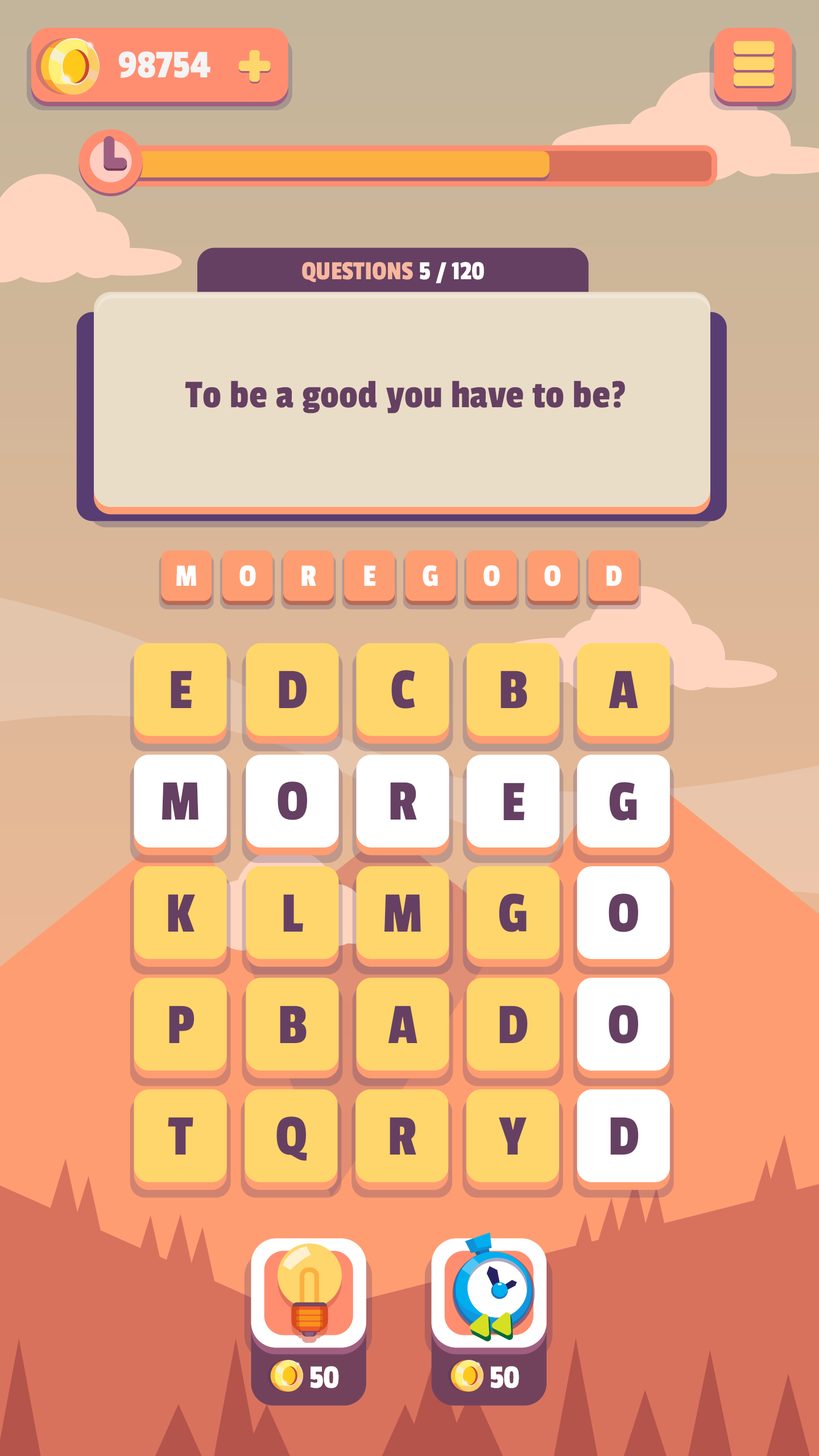
<style>
.page{position:relative;width:819px;height:1456px}
.page>*{position:absolute;margin:0}
.t1{font:40.9px "PassionOne-Regular";color:#f4f4f4}
.t2{font:27.3px "PassionOne-Regular";color:#f7b69f;text-transform:uppercase}
.t3{font:27.3px "PassionOne-Regular";color:#ffffff;text-transform:uppercase}
.t4{font:40.9px "PassionOne-Regular";color:#654062}
.t5{font:32.6px "PassionOne-Regular";color:#ffffff}
.t6{font:59.9px "PassionOne-Regular";color:#654062}
.t7{font:34.1px "PassionOne-Regular";color:#ffffff}
</style>
<div class="page">
<p class="t1" style="left:118px;top:51px;width:92px;height:27px">98754</p>
<p class="t2" style="left:302px;top:262px;width:182px;height:21px">Questions <span class="t3">5 / 120</span></p>
<p class="t4" style="left:185px;top:380px;width:440px;height:33px">To be a good you have to be?</p>
<p class="t5" style="left:176px;top:565px;width:20px;height:21px">M</p>
<p class="t5" style="left:239px;top:565px;width:17px;height:21px">O</p>
<p class="t5" style="left:301px;top:565px;width:15px;height:21px">R</p>
<p class="t5" style="left:364px;top:565px;width:12px;height:21px">E</p>
<p class="t5" style="left:423px;top:565px;width:15px;height:21px">G</p>
<p class="t5" style="left:483px;top:565px;width:17px;height:21px">O</p>
<p class="t5" style="left:544px;top:565px;width:17px;height:21px">O</p>
<p class="t5" style="left:606px;top:565px;width:16px;height:21px">D</p>
<p class="t6" style="left:171px;top:671px;width:21px;height:37px">E</p>
<p class="t6" style="left:279px;top:671px;width:28px;height:37px">D</p>
<p class="t6" style="left:391px;top:670px;width:24px;height:39px">C</p>
<p class="t6" style="left:500px;top:671px;width:27px;height:37px">B</p>
<p class="t6" style="left:609px;top:671px;width:29px;height:37px">A</p>
<p class="t6" style="left:162px;top:782px;width:36px;height:38px">M</p>
<p class="t6" style="left:278px;top:781px;width:29px;height:39px">O</p>
<p class="t6" style="left:390px;top:782px;width:27px;height:38px">R</p>
<p class="t6" style="left:503px;top:783px;width:21px;height:37px">E</p>
<p class="t6" style="left:609px;top:782px;width:28px;height:39px">G</p>
<p class="t6" style="left:499px;top:893px;width:28px;height:39px">G</p>
<p class="t6" style="left:609px;top:893px;width:29px;height:39px">O</p>
<p class="t6" style="left:168px;top:894px;width:27px;height:38px">K</p>
<p class="t6" style="left:283px;top:894px;width:20px;height:38px">L</p>
<p class="t6" style="left:384px;top:894px;width:37px;height:38px">M</p>
<p class="t6" style="left:169px;top:1006px;width:26px;height:37px">P</p>
<p class="t6" style="left:280px;top:1006px;width:27px;height:37px">B</p>
<p class="t6" style="left:388px;top:1006px;width:29px;height:37px">A</p>
<p class="t6" style="left:499px;top:1006px;width:29px;height:37px">D</p>
<p class="t6" style="left:609px;top:1005px;width:29px;height:39px">O</p>
<p class="t6" style="left:168px;top:1117px;width:25px;height:38px">T</p>
<p class="t6" style="left:276px;top:1116px;width:31px;height:45px">Q</p>
<p class="t6" style="left:390px;top:1117px;width:26px;height:38px">R</p>
<p class="t6" style="left:499px;top:1117px;width:28px;height:38px">Y</p>
<p class="t6" style="left:610px;top:1117px;width:29px;height:38px">D</p>
<p class="t7" style="left:310px;top:1366px;width:29px;height:22px">50</p>
<p class="t7" style="left:490px;top:1366px;width:29px;height:22px">50</p>
</div>
